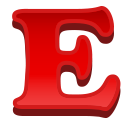
<style>
.page{position:relative;width:128px;height:128px;background:#ffffff}
.page>*{position:absolute;margin:0}
.t1{font:142.7px "CooperBlackStd";font-weight:bold;scale:1.08 1}
</style>
<div class="page">
<p class="t1" style="left:12px;top:5px;width:109px;height:107px">E</p>
</div>
